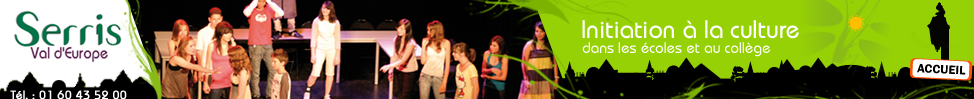
<style>
.page{position:relative;width:974px;height:99px;background:#96d105}
.page>*{position:absolute;margin:0}
.t1{font:25px "DynameSSK";color:#ffffff}
.t2{font:15px "DynameSSK";color:#ffffff}
.t3{font:11.8px "DynameSSK";color:#ffffff;font-weight:bold}
</style>
<div class="page">
<p class="t1" style="left:582px;top:20px;width:217px;height:19px">Initiation à la culture</p>
<p class="t2" style="left:582px;top:42px;width:188px;height:15px">dans les écoles et au collège</p>
<p class="t3" style="left:10px;top:90px;width:117px;height:10px">Tél. : 01 60 43 52 00</p>
</div>
